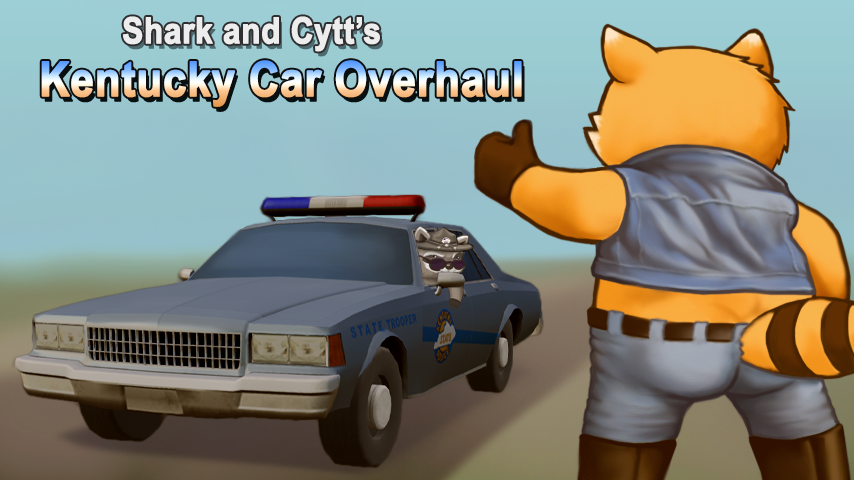
<style>
.page{position:relative;width:854px;height:480px}
.page>*{position:absolute;margin:0}
.t1{font:36px "Arial-BoldMT";color:#ffffff;font-weight:bold;scale:0.87 1}
.t2{font:48px "Arial-BoldMT";font-weight:bold;scale:0.87 1}
</style>
<div class="page">
<p class="t1" style="left:122px;top:16px;width:258px;height:36px">Shark and Cytt’s</p>
<p class="t2" style="left:41px;top:60px;width:481px;height:47px">Kentucky Car Overhaul</p>
</div>
